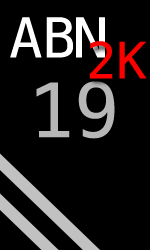
<style>
.page{position:relative;width:150px;height:250px;background:#000000}
.page>*{position:absolute;margin:0}
.t1{font:55px "Menlo-Regular";color:#ffffff}
.t2{font:50px "Menlo-Regular";color:#fc0000}
.t3{font:75px "Menlo-Regular";color:#b7b7b7}
</style>
<div class="page">
<p class="t1" style="left:10px;top:17px;width:95px;height:41px">ABN</p>
<p class="t2" style="left:89px;top:41px;width:58px;height:38px">2K</p>
<p class="t3" style="left:36px;top:81px;width:79px;height:58px">19</p>
</div>
